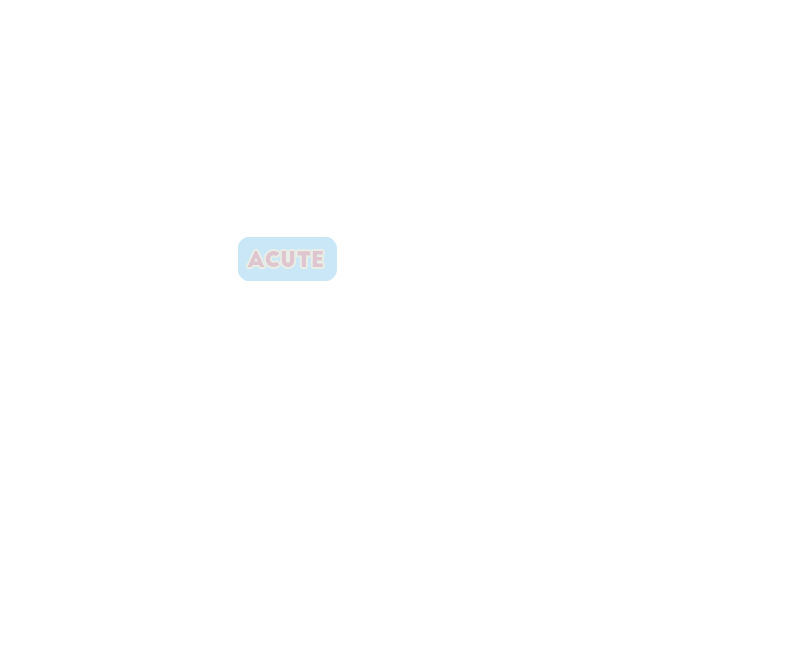
<style>
.page{position:relative;width:800px;height:650px;background:#ffffff}
.page>*{position:absolute;margin:0}
.t1{font:21.2px "BigJohn";color:#dec5d0}
</style>
<div class="page">
<p class="t1" style="left:247px;top:251px;width:76px;height:16px">Acute</p>
</div>
